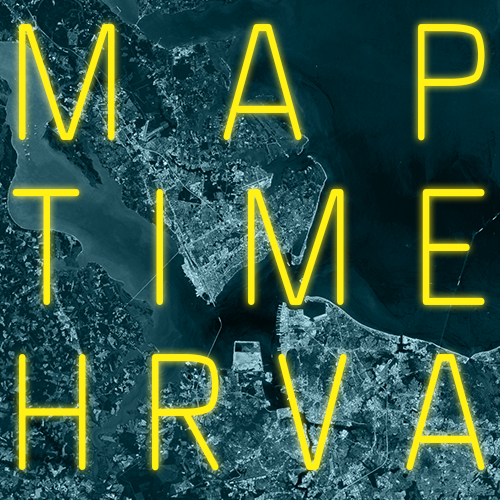
<style>
.page{position:relative;width:500px;height:500px}
.page>*{position:absolute;margin:0}
.t1{font:160px/165px "Octopus_Rounded_100";color:#fff114;font-weight:bold;scale:0.78 1}
</style>
<div class="page">
<p class="t1" style="left:12px;top:24px;width:473px;height:447px;text-align:justify">MAP<br>TIME<br>HRVA</p>
</div>
